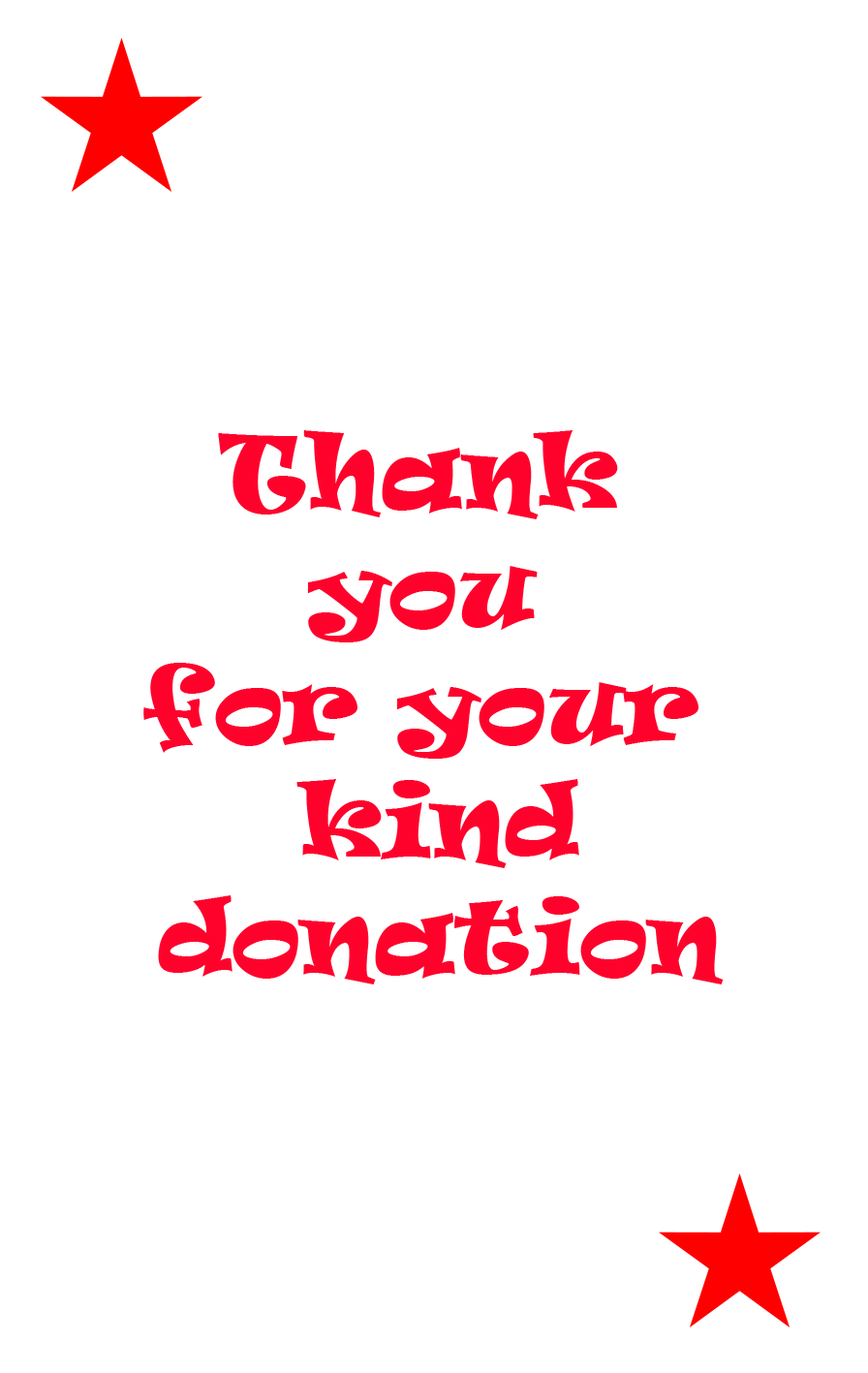
<style>
.page{position:relative;width:868px;height:1373px;background:#ffffff}
.page>*{position:absolute;margin:0}
.t1{font:96.9px "Ravie";color:#fe022c}
</style>
<div class="page">
<p class="t1" style="left:143px;top:430px;width:581px;height:555px;text-align:center">Thank <br>you <br>for your <br>kind<br>donation</p>
</div>
